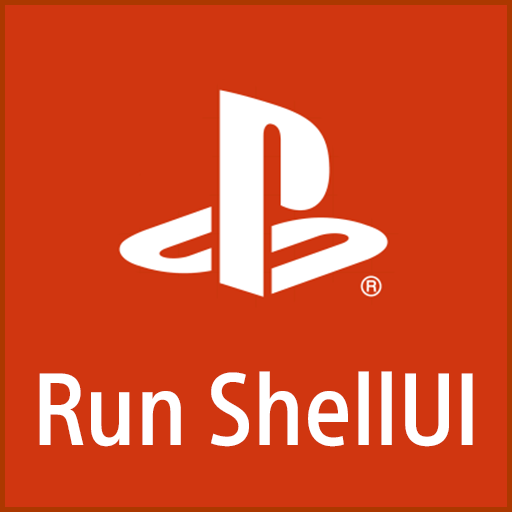
<style>
.page{position:relative;width:512px;height:512px;background:#d03610}
.page>*{position:absolute;margin:0}
.t1{font:100px "SST-CondensedMd";color:#ffffff}
</style>
<div class="page">
<p class="t1" style="left:39px;top:371px;width:434px;height:76px">Run ShellUI</p>
</div>
